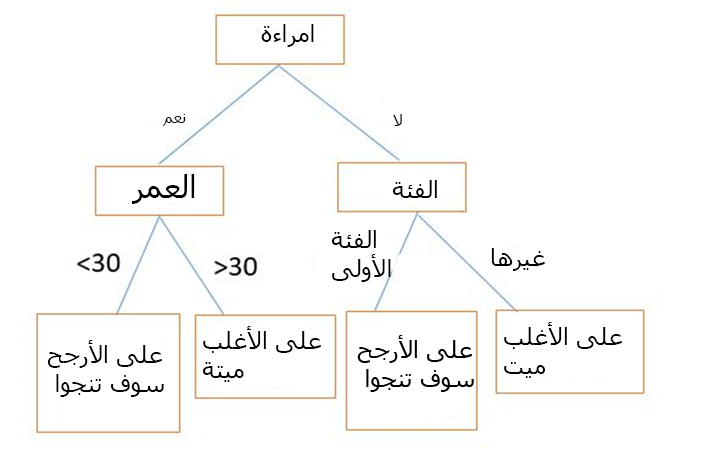
<style>
.page{position:relative;width:721px;height:456px;background:#ffffff}
.page>*{position:absolute;margin:0}
.t1{font:24px "Tahoma";color:#000000}
.t2{font:12px "Tahoma";color:#000000}
.t3{font:32px "Tahoma";color:#000000}
</style>
<div class="page">
<p class="t1" style="left:261px;top:24px;width:53px;height:23px">امراءة</p>
<p class="t2" style="left:162px;top:114px;width:24px;height:12px">نعم</p>
<p class="t2" style="left:393px;top:114px;width:9px;height:12px">لا</p>
<p class="t3" style="left:132px;top:174px;width:63px;height:30px">العمر</p>
<p class="t1" style="left:392px;top:180px;width:45px;height:18px">الفئة</p>
<p class="t1" style="left:331px;top:230px;width:60px;height:52px">الفئة <br>الأولى</p>
<p class="t1" style="left:491px;top:248px;width:54px;height:23px">غيرها</p>
<p class="t1" style="left:202px;top:326px;width:119px;height:56px">على الأغلب<br>ميتة</p>
<p class="t1" style="left:504px;top:322px;width:118px;height:56px">على الأغلب<br>ميت</p>
<p class="t1" style="left:47px;top:340px;width:117px;height:57px">على الأرجح<br> سوف تنجوا</p>
</div>
